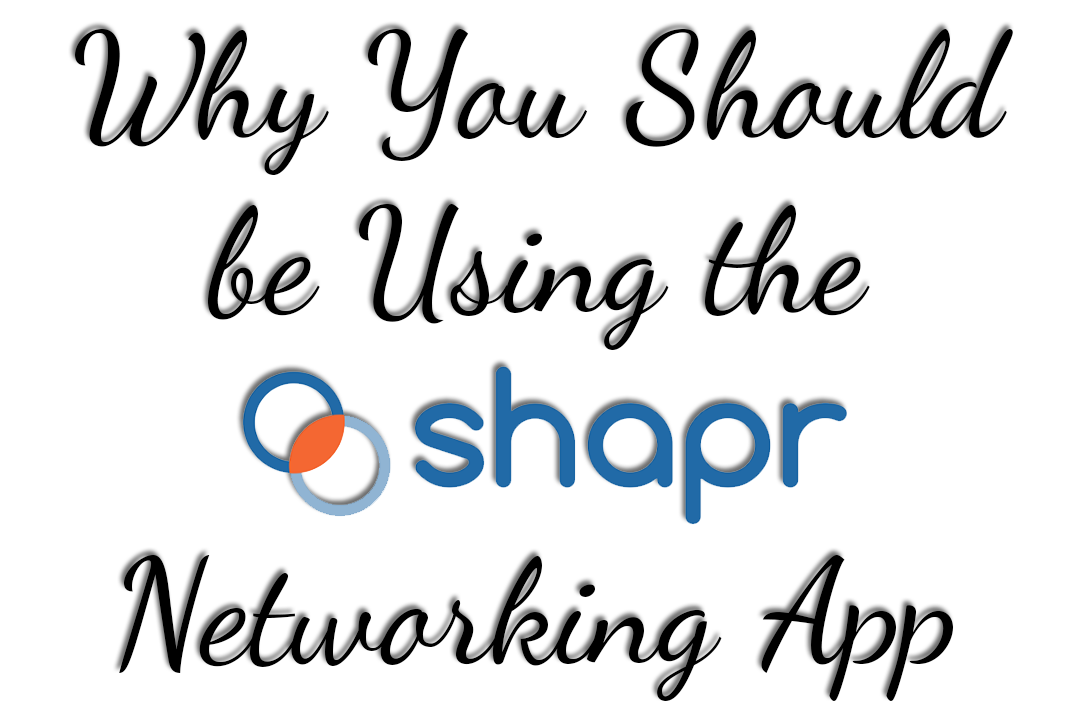
<style>
.page{position:relative;width:1080px;height:720px;background:#ffffff}
.page>*{position:absolute;margin:0}
.t1{font:146px "DancingScriptOT";color:#000000}
</style>
<div class="page">
<p class="t1" style="left:75px;top:29px;width:938px;height:672px;text-align:center">Why You Should be Using the  <br><br>Networking App</p>
</div>
